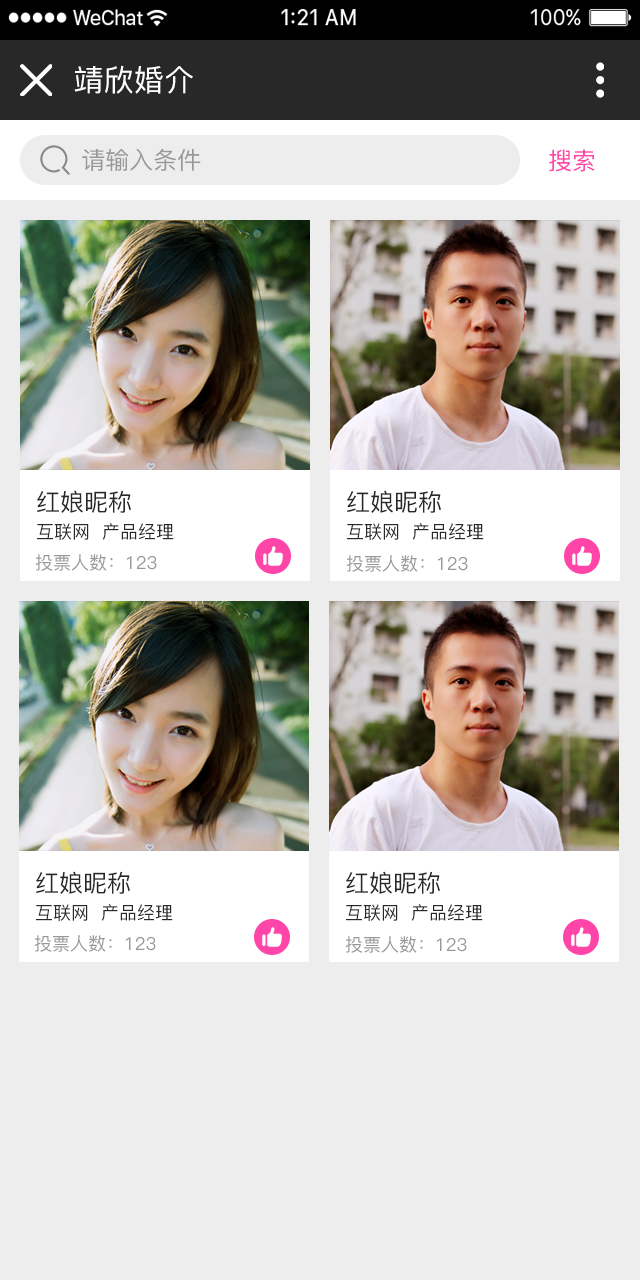
<style>
.page{position:relative;width:640px;height:1280px;background:#ededed}
.page>*{position:absolute;margin:0}
.t1{font:30px "PingFang-SC-Medium";letter-spacing:0.01em;color:#ffffff;text-transform:uppercase}
.t2{font:24px "PingFang-SC-Medium";color:#989898;text-transform:uppercase}
.t3{font:24px "PingFang-SC-Medium";color:#ff45a8;text-transform:uppercase}
.t4{font:24px "PingFang-SC-Medium";color:#282828;text-transform:uppercase}
.t5{font:18px "PingFang-SC-Medium";color:#282828;text-transform:uppercase}
.t6{font:18px "PingFang-SC-Medium";color:#989898;text-transform:uppercase}
</style>
<div class="page">
<p class="t1" style="left:74px;top:65px;width:119px;height:29px">靖欣婚介</p>
<p class="t2" style="left:82px;top:148px;width:119px;height:23px">请输入条件</p>
<p class="t3" style="left:549px;top:149px;width:46px;height:23px">搜索</p>
<p class="t4" style="left:37px;top:490px;width:94px;height:23px">红娘昵称</p>
<p class="t4" style="left:347px;top:490px;width:94px;height:23px">红娘昵称</p>
<p class="t5" style="left:37px;top:523px;width:137px;height:17px">互联网  产品经理</p>
<p class="t5" style="left:347px;top:523px;width:137px;height:17px">互联网  产品经理</p>
<p class="t6" style="left:35px;top:554px;width:122px;height:17px">投票人数：123</p>
<p class="t6" style="left:346px;top:555px;width:122px;height:17px">投票人数：123</p>
<p class="t4" style="left:36px;top:871px;width:94px;height:23px">红娘昵称</p>
<p class="t4" style="left:346px;top:871px;width:94px;height:23px">红娘昵称</p>
<p class="t5" style="left:36px;top:904px;width:137px;height:17px">互联网  产品经理</p>
<p class="t5" style="left:346px;top:904px;width:137px;height:17px">互联网  产品经理</p>
<p class="t6" style="left:34px;top:935px;width:122px;height:17px">投票人数：123</p>
<p class="t6" style="left:345px;top:936px;width:122px;height:17px">投票人数：123</p>
</div>
